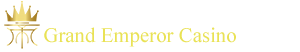
<style>
.page{position:relative;width:300px;height:52px;background:#ffffff}
.page>*{position:absolute;margin:0}
.t1{font:20.8px "TimesNewRomanPSMT";color:#eae255}
</style>
<div class="page">
<p class="t1" style="left:44px;top:27px;width:192px;height:20px">Grand Emperor Casino</p>
</div>
